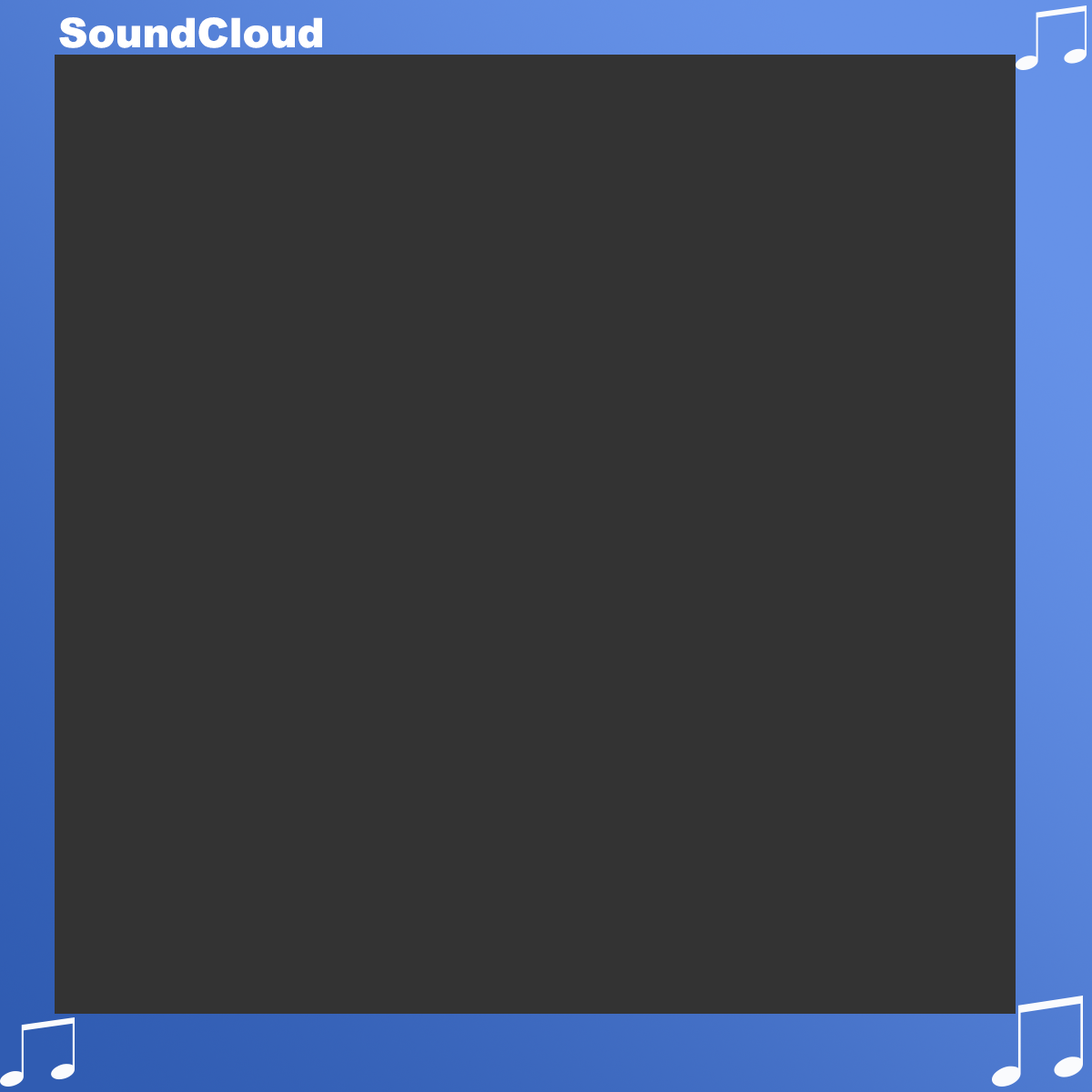
<style>
.page{position:relative;width:1092px;height:1092px;background:#333333}
.page>*{position:absolute;margin:0}
.t1{font:40.9px "Arial-Black";color:#ffffff}
</style>
<div class="page">
<p class="t1" style="left:59px;top:17px;width:263px;height:31px">SoundCloud</p>
</div>
